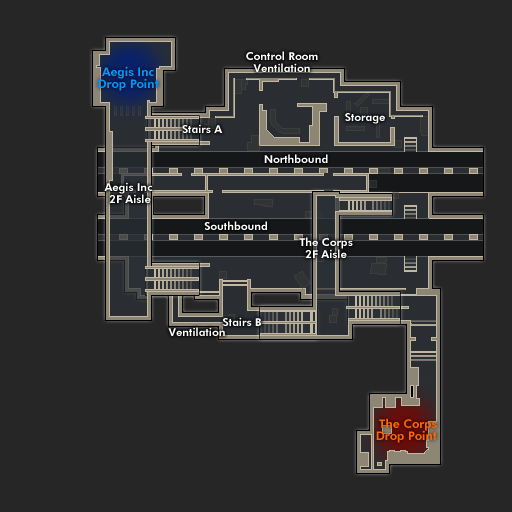
<style>
.page{position:relative;width:512px;height:512px;background:#262626}
.page>*{position:absolute;margin:0}
.t1{font:11px/12px "FuturaBT-Heavy";color:#ffffff}
.t2{font:12px/12px "FuturaBT-Heavy";color:#0099ff}
.t3{font:11px "FuturaBT-Heavy";color:#ffffff}
.t4{font:12px/12px "FuturaBT-Heavy";color:#ff6600}
</style>
<div class="page">
<p class="t1" style="left:246px;top:51px;width:72px;height:21px;text-align:center">Control Room<br>Ventilation</p>
<p class="t2" style="left:98px;top:66px;width:61px;height:25px;text-align:center">Aegis Inc<br>Drop Point</p>
<p class="t3" style="left:345px;top:113px;width:40px;height:11px">Storage</p>
<p class="t3" style="left:182px;top:124px;width:41px;height:9px">Stairs A</p>
<p class="t3" style="left:264px;top:154px;width:64px;height:9px">Northbound</p>
<p class="t1" style="left:104px;top:182px;width:48px;height:21px;text-align:center">Aegis Inc <br>2F Aisle</p>
<p class="t3" style="left:204px;top:221px;width:63px;height:9px">Southbound</p>
<p class="t1" style="left:299px;top:237px;width:54px;height:21px;text-align:center">The Corps<br>2F Aisle</p>
<p class="t3" style="left:223px;top:317px;width:38px;height:9px">Stairs B</p>
<p class="t3" style="left:168px;top:327px;width:57px;height:9px">Ventilation</p>
<p class="t4" style="left:376px;top:418px;width:61px;height:25px;text-align:center">The Corps<br>Drop Point</p>
</div>
